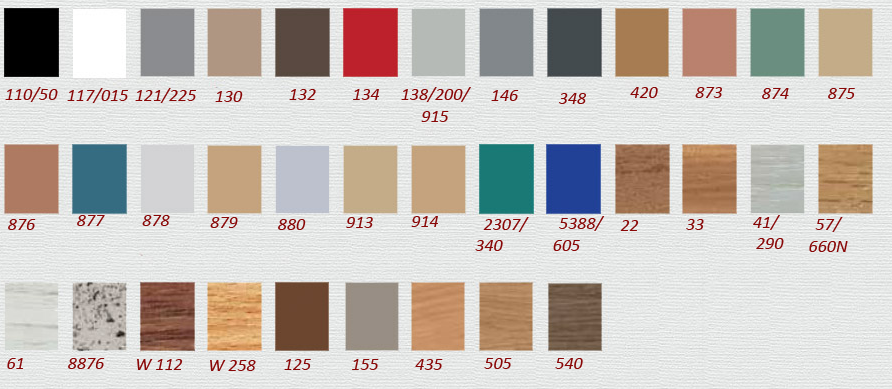
<style>
.page{position:relative;width:892px;height:389px}
.page>*{position:absolute;margin:0}
.t1{font:18px "Calibri-Italic";color:#890707}
.t2{font:14px "Calibri-Italic";color:#890707}
</style>
<div class="page">
<p class="t1" style="left:5px;top:87px;width:53px;height:15px">110/50</p>
<p class="t1" style="left:67px;top:88px;width:61px;height:15px">117/015</p>
<p class="t1" style="left:135px;top:88px;width:61px;height:15px">121/225</p>
<p class="t1" style="left:289px;top:89px;width:27px;height:11px">132</p>
<p class="t1" style="left:353px;top:89px;width:26px;height:11px">134</p>
<p class="t1" style="left:401px;top:87px;width:70px;height:35px;text-align:center">138/200/<br>915</p>
<p class="t1" style="left:630px;top:87px;width:28px;height:11px">420</p>
<p class="t1" style="left:695px;top:87px;width:27px;height:11px">873</p>
<p class="t1" style="left:762px;top:88px;width:27px;height:11px">874</p>
<p class="t1" style="left:828px;top:88px;width:27px;height:11px">875</p>
<p class="t1" style="left:215px;top:91px;width:28px;height:11px">130</p>
<p class="t1" style="left:491px;top:90px;width:28px;height:11px">146</p>
<p class="t1" style="left:559px;top:93px;width:27px;height:11px">348</p>
<p class="t1" style="left:8px;top:219px;width:28px;height:11px">876</p>
<p class="t1" style="left:77px;top:215px;width:28px;height:11px">877</p>
<p class="t1" style="left:142px;top:215px;width:28px;height:11px">878</p>
<p class="t1" style="left:210px;top:217px;width:28px;height:11px">879</p>
<p class="t1" style="left:278px;top:219px;width:28px;height:11px">880</p>
<p class="t1" style="left:346px;top:217px;width:27px;height:11px">913</p>
<p class="t1" style="left:411px;top:216px;width:27px;height:11px">914</p>
<p class="t1" style="left:475px;top:217px;width:54px;height:34px;text-align:center">2307/<br>340</p>
<p class="t1" style="left:553px;top:216px;width:52px;height:35px;text-align:center">5388/<br>605</p>
<p class="t1" style="left:620px;top:220px;width:19px;height:11px">22</p>
<p class="t1" style="left:686px;top:219px;width:18px;height:11px">33</p>
<p class="t1" style="left:753px;top:215px;width:31px;height:34px;text-align:center">41/<br>    290</p>
<p class="t1" style="left:809px;top:217px;width:39px;height:35px;text-align:center">57/<br>660N</p>
<p class="t1" style="left:7px;top:358px;width:16px;height:11px">61</p>
<p class="t1" style="left:68px;top:358px;width:37px;height:11px">8876</p>
<p class="t1" style="left:137px;top:359px;width:46px;height:11px">W 112</p>
<p class="t1" style="left:210px;top:360px;width:46px;height:11px">W 258</p>
<p class="t1" style="left:284px;top:359px;width:27px;height:11px"><span class="t2">     </span>125</p>
<p class="t1" style="left:352px;top:359px;width:27px;height:11px"><span class="t2">            </span>155</p>
<p class="t1" style="left:415px;top:359px;width:28px;height:11px">435</p>
<p class="t1" style="left:484px;top:358px;width:28px;height:11px">505</p>
<p class="t1" style="left:555px;top:358px;width:28px;height:11px">540</p>
</div>
